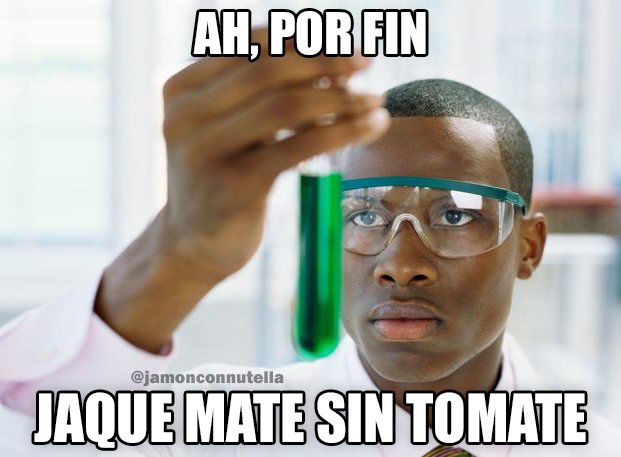
<style>
.page{position:relative;width:621px;height:457px}
.page>*{position:absolute;margin:0}
.t1{font:53.2px "Impact";color:#ffffff}
.t2{font:17.6px "FranklinGothic-Heavy";color:#808184}
.t3{font:61.2px "Impact";color:#ffffff;scale:0.97 1}
</style>
<div class="page">
<p class="t1" style="left:193px;top:11px;width:233px;height:49px">AH, POR FIN</p>
<p class="t2" style="left:131px;top:370px;width:153px;height:16px">@jamonconnutella</p>
<p class="t3" style="left:34px;top:392px;width:552px;height:56px">JAQUE MATE SIN TOMATE</p>
</div>
